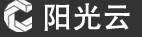
<style>
.page{position:relative;width:142px;height:37px;background:#333333}
.page>*{position:absolute;margin:0}
.t1{font:30px "AdobeHeitiStd-Regular";letter-spacing:0.001em;color:#ffffff}
</style>
<div class="page">
<p class="t1" style="left:44px;top:3px;width:86px;height:28px">阳光云</p>
</div>
